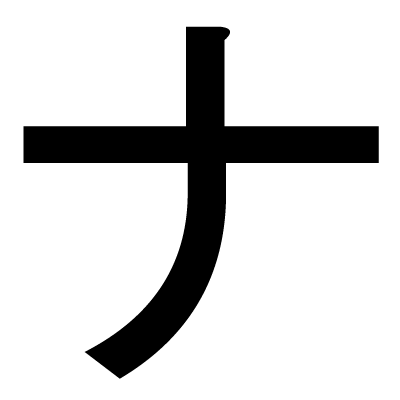
<style>
.page{position:relative;width:400px;height:400px;background:#ffffff}
.page>*{position:absolute;margin:0}
.t1{font:424.8px "MS-PGothic";color:#000000}
</style>
<div class="page">
<p class="t1" style="left:23px;top:26px;width:356px;height:353px">ナ</p>
</div>
